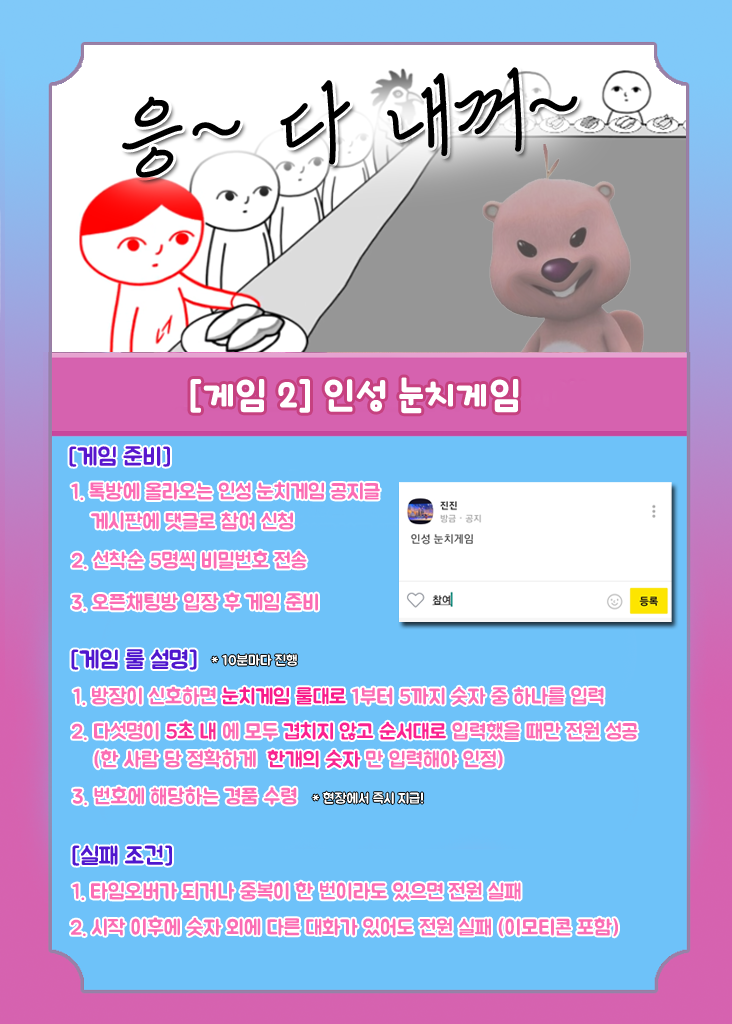
<style>
.page{position:relative;width:732px;height:1024px;background:#6ec2f9}
.page>*{position:absolute;margin:0}
.t1{font:100px "Pix_HUMoo132";color:#000000}
.t2{font:40px "icTTHayanbunpilB";color:#ffffff}
.t3{font:24px "Pix_BMJUAOTF";color:#5817ce}
.t4{font:21px "Pix_BMJUAOTF";color:#fb6db4}
.t5{font:24px "Pix_BMJUAOTF";color:#4f17ce}
.t6{font:14px "Pix_BMJUAOTF";color:#ffffff}
.t7{font:21px "Pix_BMJUAOTF";color:#f81b8a}
.t8{font:21px "Pix_BMJUAOTF";color:#f72c92}
.t9{font:21px "Pix_BMJUAOTF";color:#fb218f}
.t10{font:21px "Pix_BMJUAOTF";color:#f9248f}
</style>
<div class="page">
<p class="t1" style="left:122px;top:67px;width:456px;height:111px;rotate:-4deg">응~ 다 내꺼~</p>
<p class="t2" style="left:190px;top:377px;width:329px;height:37px">[게임 2] 인성 눈치게임</p>
<p class="t3" style="left:69px;top:446px;width:101px;height:21px">[게임 준비]</p>
<p class="t4" style="left:71px;top:481px;width:309px;height:20px">1. 톡방에 올라오는 인성 눈치게임 공지글</p>
<p class="t4" style="left:91px;top:512px;width:203px;height:18px">게시판에 댓글로 참여 신청</p>
<p class="t4" style="left:72px;top:550px;width:235px;height:20px">2. 선착순 5명씩 비밀번호 전송</p>
<p class="t4" style="left:72px;top:592px;width:246px;height:20px">3. 오픈채팅방 입장 후 게임 준비</p>
<p class="t5" style="left:71px;top:649px;width:126px;height:21px">[게임 룰 설명]</p>
<p class="t6" style="left:211px;top:654px;width:86px;height:12px">* 10분마다 진행</p>
<p class="t4" style="left:73px;top:686px;width:531px;height:20px">1. 방장이 신호하면 <span class="t7">눈치게임 룰대로 </span>1부터 5까지 숫자 중 하나를 입력</p>
<p class="t4" style="left:72px;top:721px;width:566px;height:20px">2. 다섯명이 <span class="t8">5초 내 </span>에 모두 <span class="t9">겹치지 않고 순서대로</span> 입력했을 때만 전원 성공</p>
<p class="t4" style="left:94px;top:749px;width:409px;height:20px">(한 사람 당 정확하게  <span class="t10">한개의 숫자</span> 만 입력해야 인정)</p>
<p class="t4" style="left:73px;top:786px;width:224px;height:20px">3. 번호에 해당하는 경품 수령</p>
<p class="t6" style="left:312px;top:791px;width:112px;height:13px">* 현장에서 즉시 지급!</p>
<p class="t5" style="left:72px;top:845px;width:100px;height:21px">[실패 조건]</p>
<p class="t4" style="left:72px;top:881px;width:449px;height:20px">1. 타임오버가 되거나 중복이 한 번이라도 있으면 전원 실패</p>
<p class="t4" style="left:71px;top:917px;width:547px;height:20px">2. 시작 이후에 숫자 외에 다른 대화가 있어도 전원 실패 (이모티콘 포함)</p>
</div>
